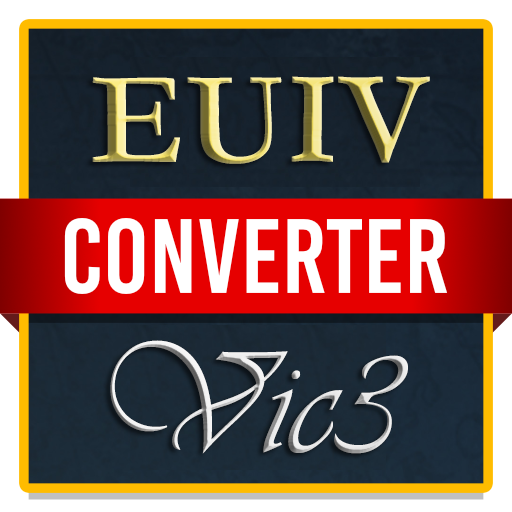
<style>
.page{position:relative;width:512px;height:512px}
.page>*{position:absolute;margin:0}
.t1{font:133.3px "Garamond-Bold"}
.t2{font:150px "Vivaldii"}
</style>
<div class="page">
<p class="t1" style="left:92px;top:76px;width:338px;height:378px;text-align:center">EUIV<br><br><span class="t2">Vic3</span></p>
</div>
